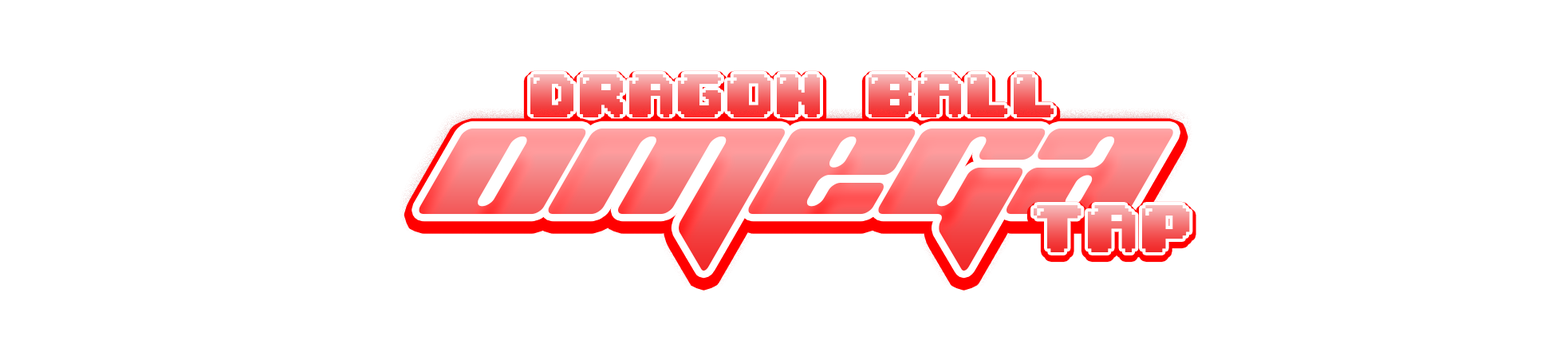
<style>
.page{position:relative;width:1568px;height:364px;background:#ffffff}
.page>*{position:absolute;margin:0}
.t1{font:52.3px "04b30"}
.t2{font:161.4px "PlanetKosmos"}
.t3{font:57.6px "04b30"}
</style>
<div class="page">
<p class="t1" style="left:530px;top:74px;width:524px;height:43px">DRAGON BALL</p>
<p class="t2" style="left:419px;top:128px;width:754px;height:142px">OMEGA</p>
<p class="t3" style="left:1034px;top:205px;width:156px;height:47px">TAP</p>
</div>
